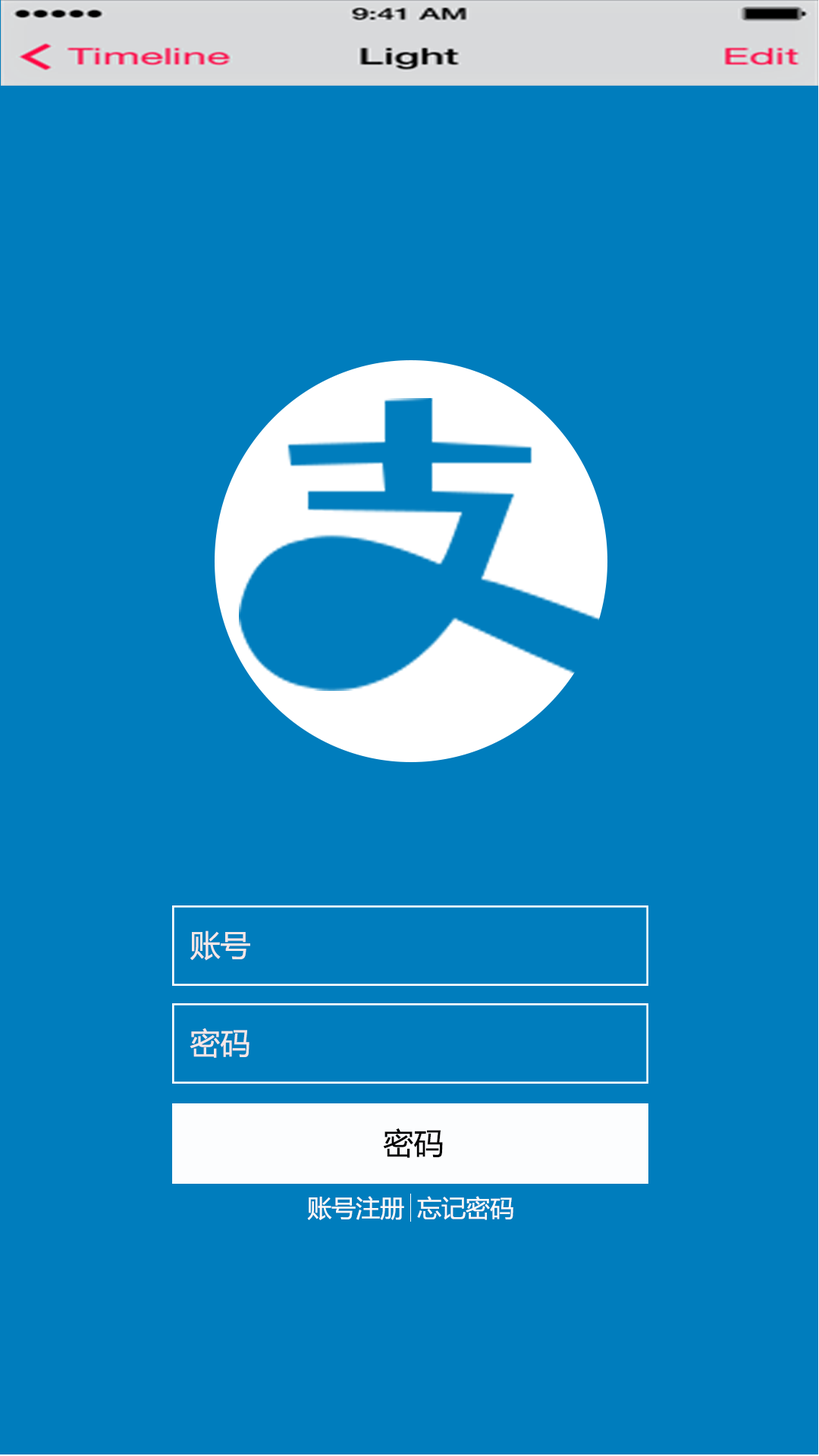
<style>
.page{position:relative;width:819px;height:1456px;background:#007dbd}
.page>*{position:absolute;margin:0}
.t1{font:30.3px "MicrosoftYaHei";color:#f5e7e7}
.t2{font:30.3px "MicrosoftYaHei";color:#040404}
.t3{font:24.3px "MicrosoftYaHei";color:#fcf8f8}
</style>
<div class="page">
<p class="t1" style="left:190px;top:930px;width:60px;height:31px">账号</p>
<p class="t1" style="left:190px;top:1028px;width:59px;height:30px">密码</p>
<p class="t2" style="left:383px;top:1128px;width:60px;height:30px">密码</p>
<p class="t3" style="left:307px;top:1196px;width:97px;height:24px">账号注册</p>
<p class="t3" style="left:417px;top:1196px;width:96px;height:24px">忘记密码</p>
</div>
